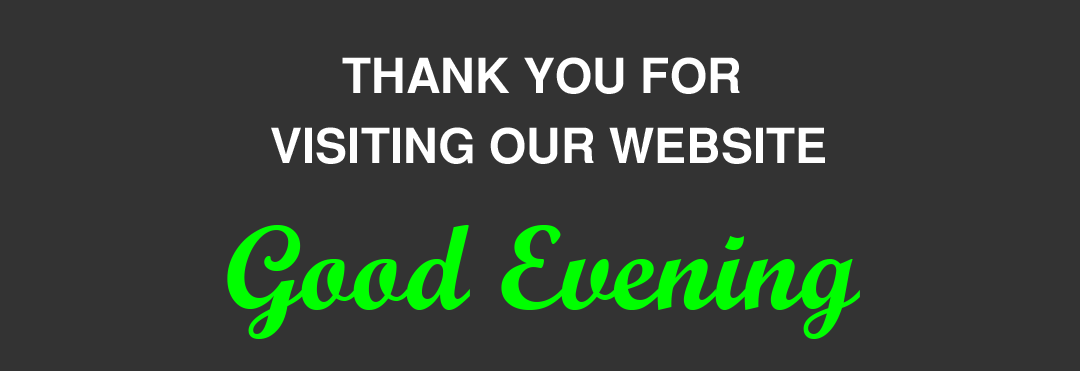
<style>
.page{position:relative;width:1080px;height:371px;background:#333333}
.page>*{position:absolute;margin:0}
.t1{font:48px/150px "SansSerifBold";color:#ffffff}
.t2{font:120px "ScriptMTBold";color:#00ff00}
</style>
<div class="page">
<p class="t1" style="left:271px;top:57px;width:554px;height:107px;text-align:center">THANK YOU FOR <br>VISITING OUR WEBSITE</p>
<p class="t2" style="left:227px;top:225px;width:633px;height:114px">Good Evening</p>
</div>
